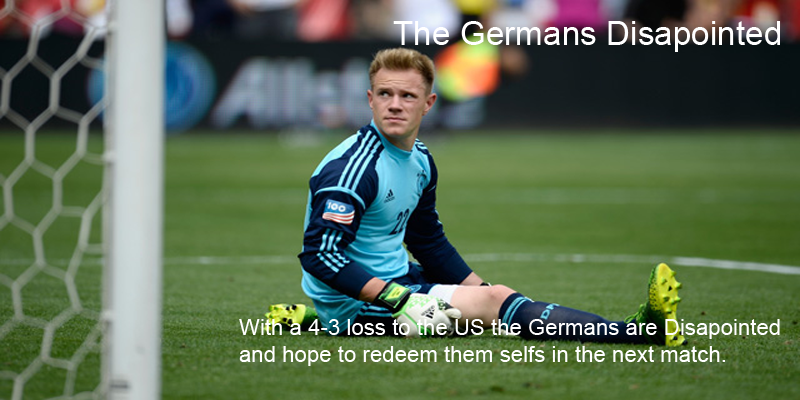
<style>
.page{position:relative;width:800px;height:400px}
.page>*{position:absolute;margin:0}
.t1{font:33.3px "ArialMT";color:#ffffff}
.t2{font:22.2px "ArialMT";color:#ffffff}
</style>
<div class="page">
<p class="t1" style="left:393px;top:21px;width:387px;height:31px">The Germans Disapointed</p>
<p class="t2" style="left:239px;top:319px;width:541px;height:47px">With a 4-3 loss to the US the Germans are Disapointed<br>and hope to redeem them selfs in the next match.</p>
</div>
